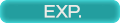
<style>
.page{position:relative;width:120px;height:23px;background:#239e9f}
.page>*{position:absolute;margin:0}
.t1{font:16px "GothicMB101Pro-Medium";letter-spacing:-0.04em;color:#ebece8}
</style>
<div class="page">
<p class="t1" style="left:44px;top:5px;width:37px;height:13px">EXP.</p>
</div>
